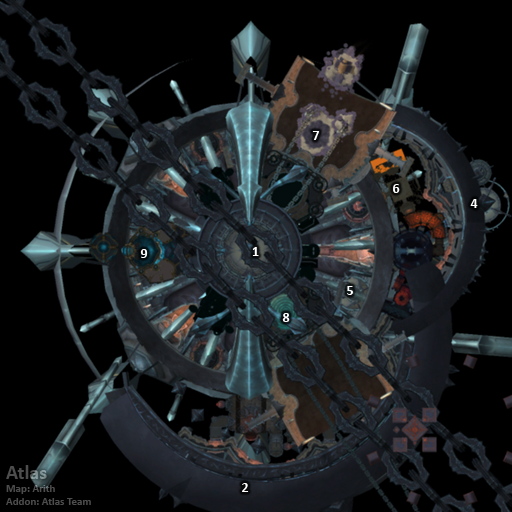
<style>
.page{position:relative;width:512px;height:512px;background:#000000}
.page>*{position:absolute;margin:0}
.t1{font:14px "Calibri-Bold";color:#ffffff}
</style>
<div class="page">
<p class="t1" style="left:312px;top:131px;width:8px;height:9px">7</p>
<p class="t1" style="left:393px;top:184px;width:7px;height:9px">6</p>
<p class="t1" style="left:470px;top:199px;width:8px;height:9px">4</p>
<p class="t1" style="left:140px;top:249px;width:8px;height:9px">9</p>
<p class="t1" style="left:252px;top:247px;width:7px;height:9px">1</p>
<p class="t1" style="left:347px;top:286px;width:6px;height:9px">5</p>
<p class="t1" style="left:282px;top:313px;width:8px;height:9px">8</p>
<p class="t1" style="left:242px;top:483px;width:7px;height:9px">2</p>
</div>
